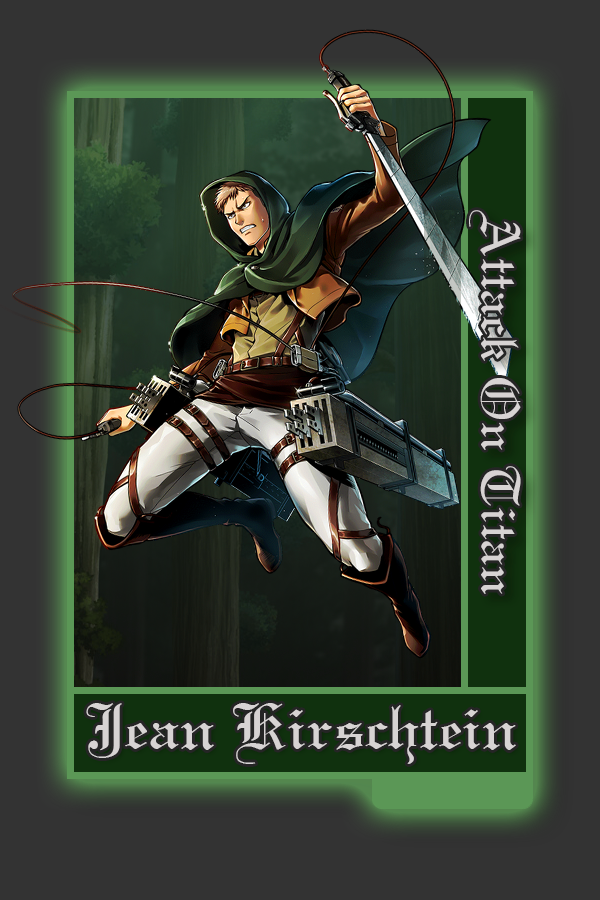
<style>
.page{position:relative;width:600px;height:900px;background:#333333}
.page>*{position:absolute;margin:0}
.t1{font:58.3px "Linotext";color:#d7d4d4}
.t2{font:70.1px "Linotext";color:#d7d4d4}
</style>
<div class="page">
<p class="t1" style="left:469px;top:210px;width:52px;height:384px;rotate:90deg">Attack On Titan</p>
<p class="t2" style="left:86px;top:703px;width:430px;height:61px">Jean Kirschtein</p>
</div>
